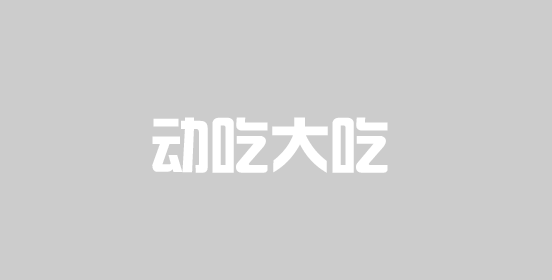
<style>
.page{position:relative;width:552px;height:280px;background:#cccccc}
.page>*{position:absolute;margin:0}
.t1{font:60px "hzgb";color:#ffffff}
</style>
<div class="page">
<p class="t1" style="left:152px;top:117px;width:236px;height:56px">动吃大吃</p>
</div>
